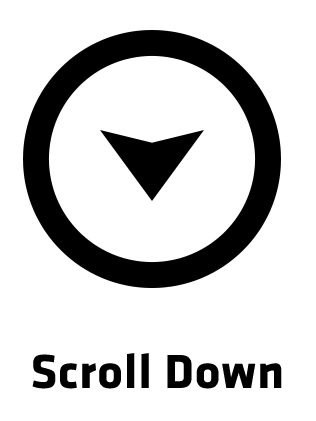
<style>
.page{position:relative;width:316px;height:421px;background:#ffffff}
.page>*{position:absolute;margin:0}
.t1{font:49px "KlavikaBold-Bold";letter-spacing:0.023em;color:#000000}
</style>
<div class="page">
<p class="t1" style="left:32px;top:353px;width:250px;height:36px">Scroll Down</p>
</div>
